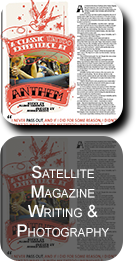
<style>
.page{position:relative;width:139px;height:271px}
.page>*{position:absolute;margin:0}
.t1{font:16.7px/19.4px "ArialMT";color:#ffffff;font-variant:small-caps}
</style>
<div class="page">
<p class="t1" style="left:17px;top:165px;width:92px;height:72px;text-align:center">Satellite Magazine Writing &amp;<br>Photography</p>
</div>
